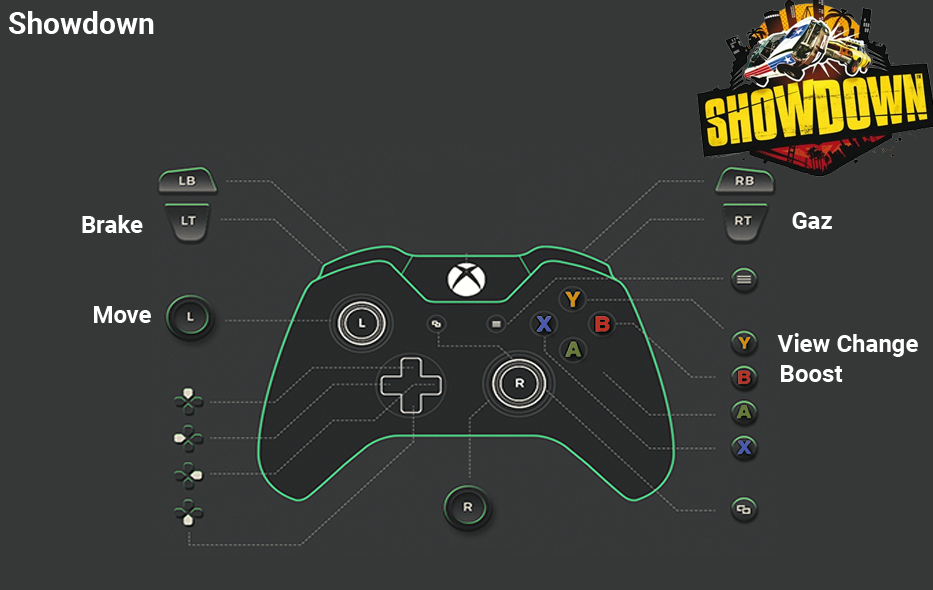
<style>
.page{position:relative;width:933px;height:590px;background:#363838}
.page>*{position:absolute;margin:0}
.t1{font:30px "Roboto-Bold";color:#ffffff}
.t2{font:24px "Roboto-Bold";color:#ffffff}
</style>
<div class="page">
<p class="t1" style="left:9px;top:11px;width:145px;height:23px">Showdown</p>
<p class="t2" style="left:82px;top:215px;width:61px;height:18px">Brake</p>
<p class="t2" style="left:792px;top:212px;width:40px;height:17px">Gaz</p>
<p class="t2" style="left:94px;top:306px;width:57px;height:17px">Move</p>
<p class="t2" style="left:777px;top:333px;width:141px;height:24px">View Change</p>
<p class="t2" style="left:781px;top:365px;width:62px;height:17px">Boost</p>
</div>
